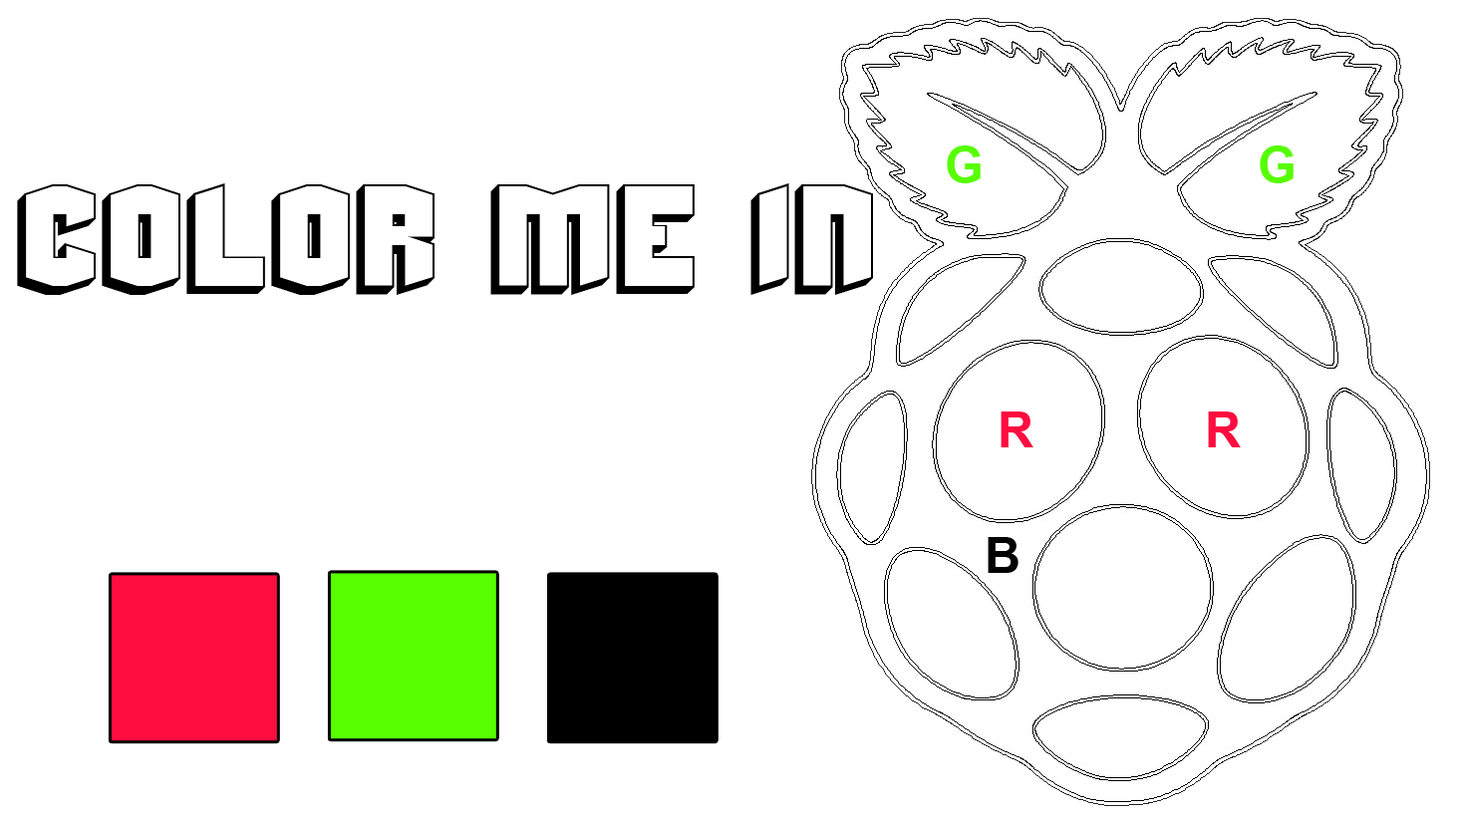
<style>
.page{position:relative;width:1458px;height:818px;background:#ffffff}
.page>*{position:absolute;margin:0}
.t1{font:49.8px "Arial-BoldMT";color:#57ff00}
.t2{font:99.6px "BeyondControl";color:#000000}
.t3{font:49.8px "Arial-BoldMT";color:#ff0d40}
.t4{font:49.8px "Arial-BoldMT";color:#000000}
</style>
<div class="page">
<p class="t1" style="left:947px;top:145px;width:33px;height:38px">G</p>
<p class="t1" style="left:1259px;top:145px;width:34px;height:38px">G</p>
<p class="t2" style="left:17px;top:183px;width:856px;height:112px">Color ME IN</p>
<p class="t3" style="left:1000px;top:412px;width:33px;height:35px">R</p>
<p class="t3" style="left:1208px;top:412px;width:32px;height:35px">R</p>
<p class="t4" style="left:987px;top:537px;width:31px;height:36px">B</p>
</div>
